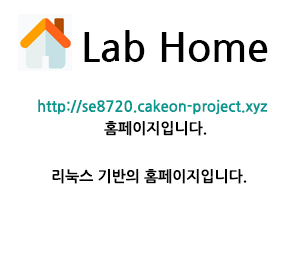
<style>
.page{position:relative;width:300px;height:280px;background:#ffffff}
.page>*{position:absolute;margin:0}
.t1{font:40px "NanumGothicBold";color:#000000}
.t2{font:15px "NanumGothicBold";color:#0a978f}
.t3{font:15px "NanumGothicBold";color:#000000}
</style>
<div class="page">
<p class="t1" style="left:84px;top:30px;width:184px;height:32px">Lab Home</p>
<p class="t2" style="left:38px;top:99px;width:229px;height:16px">http://se8720.cakeon-project.xyz</p>
<p class="t3" style="left:104px;top:121px;width:103px;height:15px">홈페이지입니다.</p>
<p class="t3" style="left:52px;top:169px;width:195px;height:15px">리눅스 기반의 홈페이지입니다.</p>
</div>
